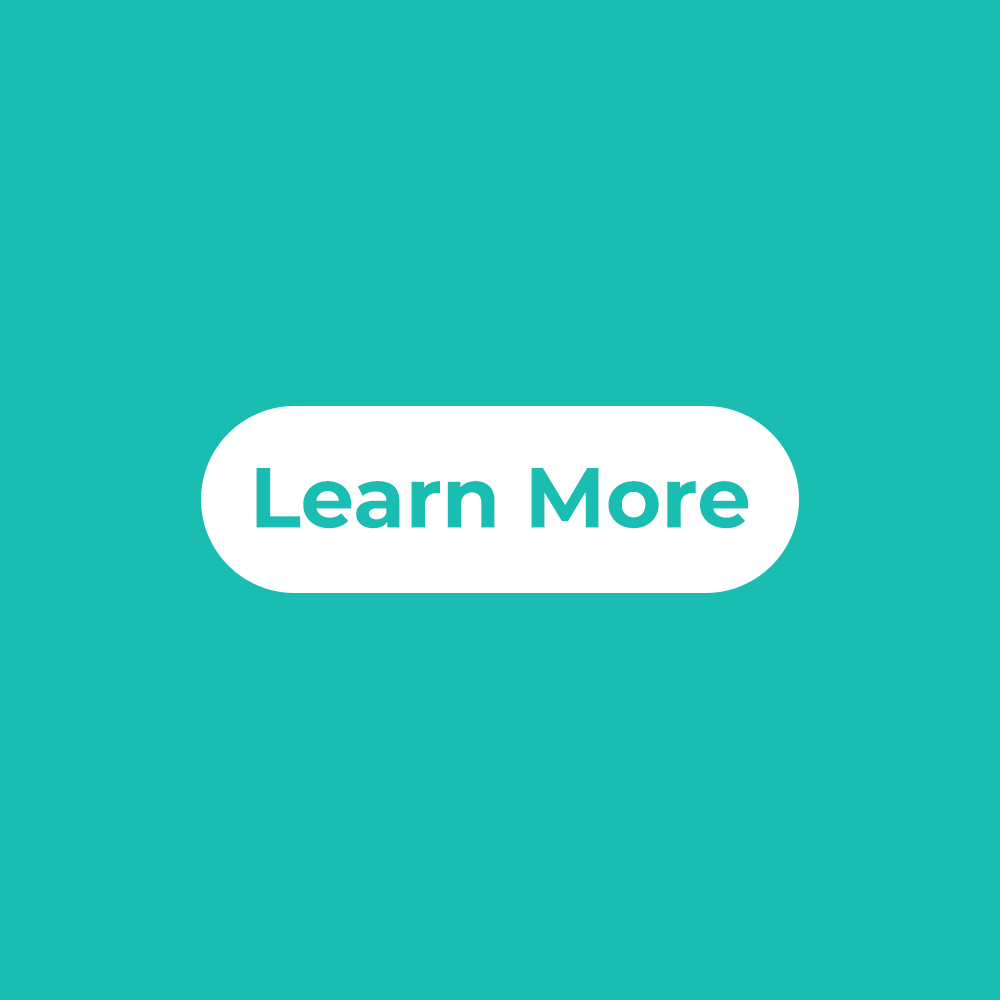
<style>
.page{position:relative;width:1000px;height:1000px;background:#19bdb2}
.page>*{position:absolute;margin:0}
.t1{font:85px "Montserrat-Bold";color:#19bdb2}
</style>
<div class="page">
<p class="t1" style="left:256px;top:468px;width:493px;height:61px">Learn More</p>
<p class="t1" style="left:256px;top:468px;width:493px;height:61px">Learn More</p>
</div>
